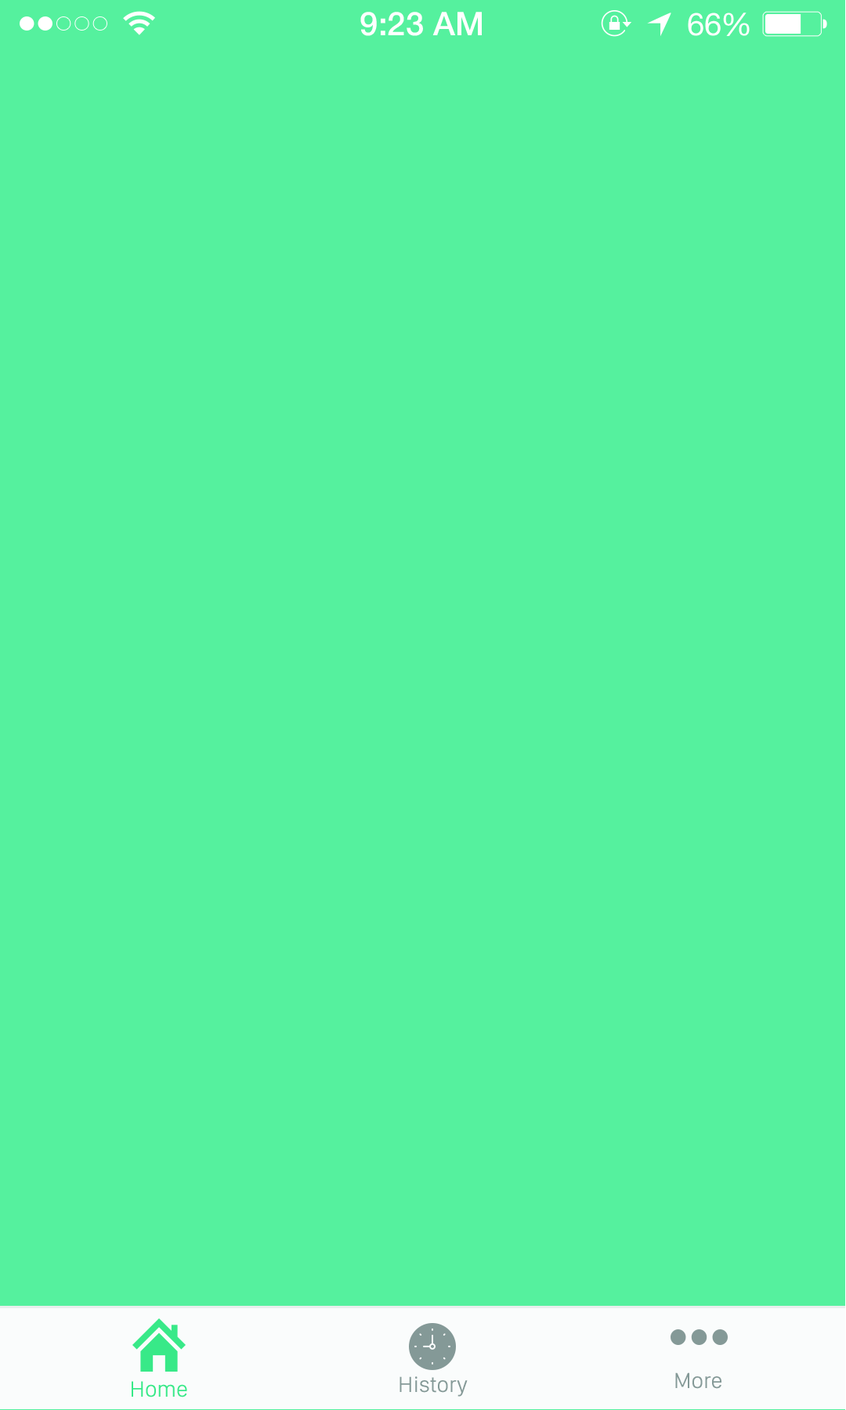
<style>
.page{position:relative;width:846px;height:1410px;background:#55f19e}
.page>*{position:absolute;margin:0}
.t1{font:32.7px "HelveticaNeue-Medium";color:#ffffff}
.t2{font:31.3px "HelveticaNeue";color:#ffffff}
.t3{font:31.3px "HelveticaNeue";letter-spacing:-0.02em;color:#ffffff}
.t4{font:22.7px "SanFranciscoDisplay-Regular";color:#849997}
.t5{font:22.8px "SanFranciscoDisplay-Regular";color:#38e988}
</style>
<div class="page">
<p class="t1" style="left:360px;top:12px;width:122px;height:24px">9:23 AM</p>
<p class="t2" style="left:688px;top:13px;width:62px;height:23px">6<span class="t3">6</span>%</p>
<p class="t4" style="left:675px;top:1372px;width:46px;height:17px">More</p>
<p class="t5" style="left:132px;top:1381px;width:55px;height:16px">Home</p>
<p class="t4" style="left:399px;top:1376px;width:69px;height:20px">History</p>
</div>
